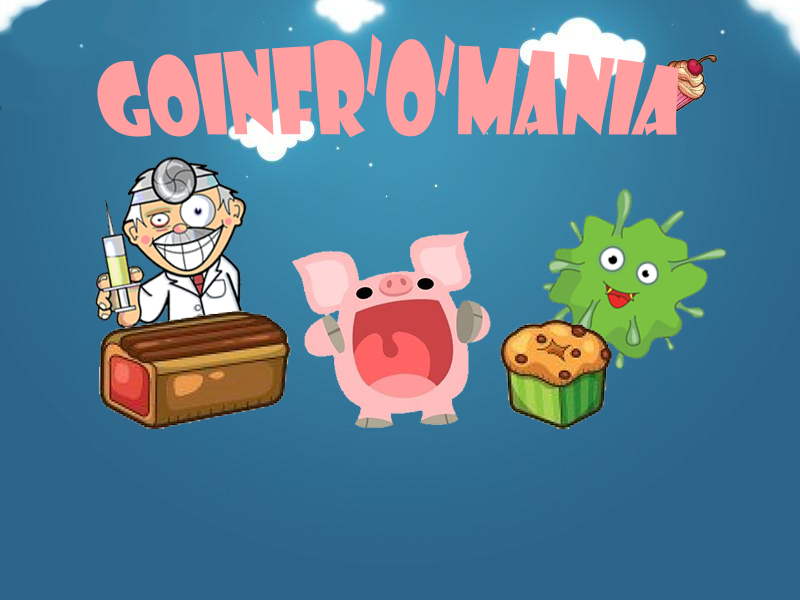
<style>
.page{position:relative;width:800px;height:600px}
.page>*{position:absolute;margin:0}
.t1{font:72px "ShowcardGothic-Reg";color:#ff9fa0}
</style>
<div class="page">
<p class="t1" style="left:97px;top:33px;width:582px;height:105px">Goinfr’o’mania</p>
</div>
